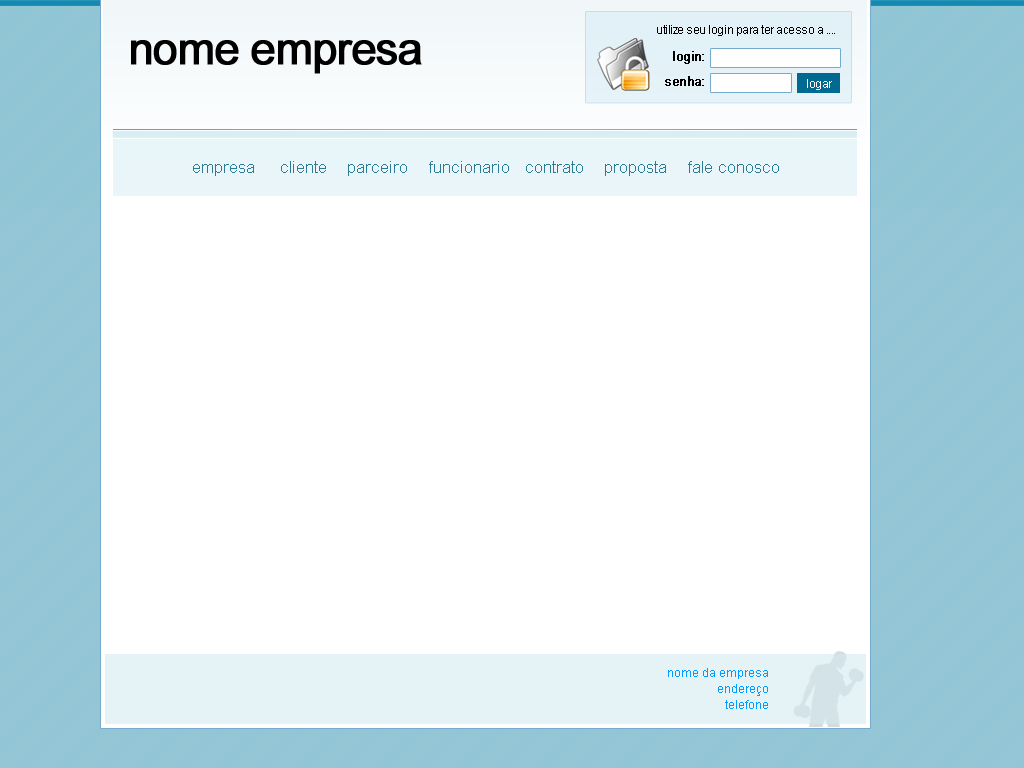
<style>
.page{position:relative;width:1024px;height:768px;background:#ffffff}
.page>*{position:absolute;margin:0}
.t1{font:12px "ArialMT";letter-spacing:-0.04em;color:#000000}
.t2{font:45.1px "ArialMT";letter-spacing:-0.04em;color:#000000;font-weight:bold}
.t3{font:13px/25px "ArialMT";letter-spacing:-0.04em;color:#000000;font-weight:bold}
.t4{font:12px "ArialMT";letter-spacing:-0.04em;color:#ffffff}
.t5{font:17px "ArialMT";color:#2b7b94}
.t6{font:12px/16px "ArialMT";color:#009cff}
</style>
<div class="page">
<p class="t1" style="left:657px;top:25px;width:178px;height:11px">utilize seu login para ter acesso a ....</p>
<p class="t2" style="left:131px;top:40px;width:291px;height:34px">nome empresa</p>
<p class="t3" style="left:665px;top:51px;width:39px;height:35px;text-align:right">login:<br>senha:</p>
<p class="t4" style="left:807px;top:79px;width:25px;height:11px">logar</p>
<p class="t5" style="left:193px;top:161px;width:586px;height:15px">empresa     cliente    parceiro    funcionario   contrato    proposta    fale conosco</p>
<p class="t6" style="left:668px;top:668px;width:100px;height:41px;text-align:right">nome da empresa<br>endereço<br>telefone</p>
</div>
